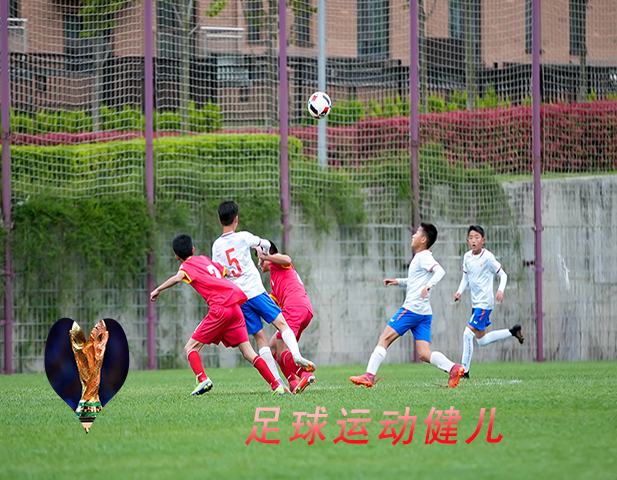
<style>
.page{position:relative;width:617px;height:480px}
.page>*{position:absolute;margin:0}
.t1{font:41.8px "SimHei";letter-spacing:0.1em;font-weight:bold;font-style:italic;scale:0.94 1}
</style>
<div class="page">
<p class="t1" style="left:245px;top:406px;width:258px;height:40px">足球运动健儿</p>
</div>
